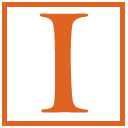
<style>
.page{position:relative;width:128px;height:128px;background:#ffffff}
.page>*{position:absolute;margin:0}
.t1{font:153px "BellMT";color:#e06421;scale:1.2 1}
</style>
<div class="page">
<p class="t1" style="left:40px;top:13px;width:48px;height:100px">I</p>
</div>
